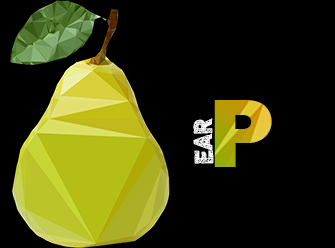
<style>
.page{position:relative;width:335px;height:248px;background:#000000}
.page>*{position:absolute;margin:0}
.t1{font:100px "FranklinGothic-Heavy"}
.t2{font:18px "Adamas-Regular";color:#ffffff}
</style>
<div class="page">
<p class="t1" style="left:214px;top:100px;width:58px;height:67px">P</p>
<p class="t2" style="left:193px;top:118px;width:21px;height:46px;rotate:-91deg">EAR</p>
</div>
